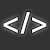
<style>
.page{position:relative;width:50px;height:50px;background:#333333}
.page>*{position:absolute;margin:0}
.t1{font:30px "MyriadPro-Bold";color:#ffffff}
</style>
<div class="page">
<p class="t1" style="left:3px;top:12px;width:44px;height:22px">&lt;/&gt;</p>
</div>
